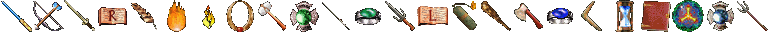
<style>
.page{position:relative;width:768px;height:32px;background:#ffffff}
.page>*{position:absolute;margin:0}
.t1{font:18px "HerculanumLTW01-Bold";color:#661010}
.t2{font:18px "HerculanumLTW01-Bold";color:#911710}
</style>
<div class="page">
<p class="t1" style="left:108px;top:9px;width:9px;height:13px">R</p>
<p class="t2" style="left:429px;top:9px;width:8px;height:12px">L</p>
</div>
